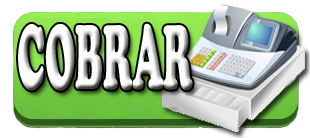
<style>
.page{position:relative;width:310px;height:138px}
.page>*{position:absolute;margin:0}
.t1{font:88.1px "CooperBT-Black";color:#fcfdfb;scale:0.41 1}
</style>
<div class="page">
<p class="t1" style="left:18px;top:23px;width:175px;height:68px">COBRAR</p>
</div>
